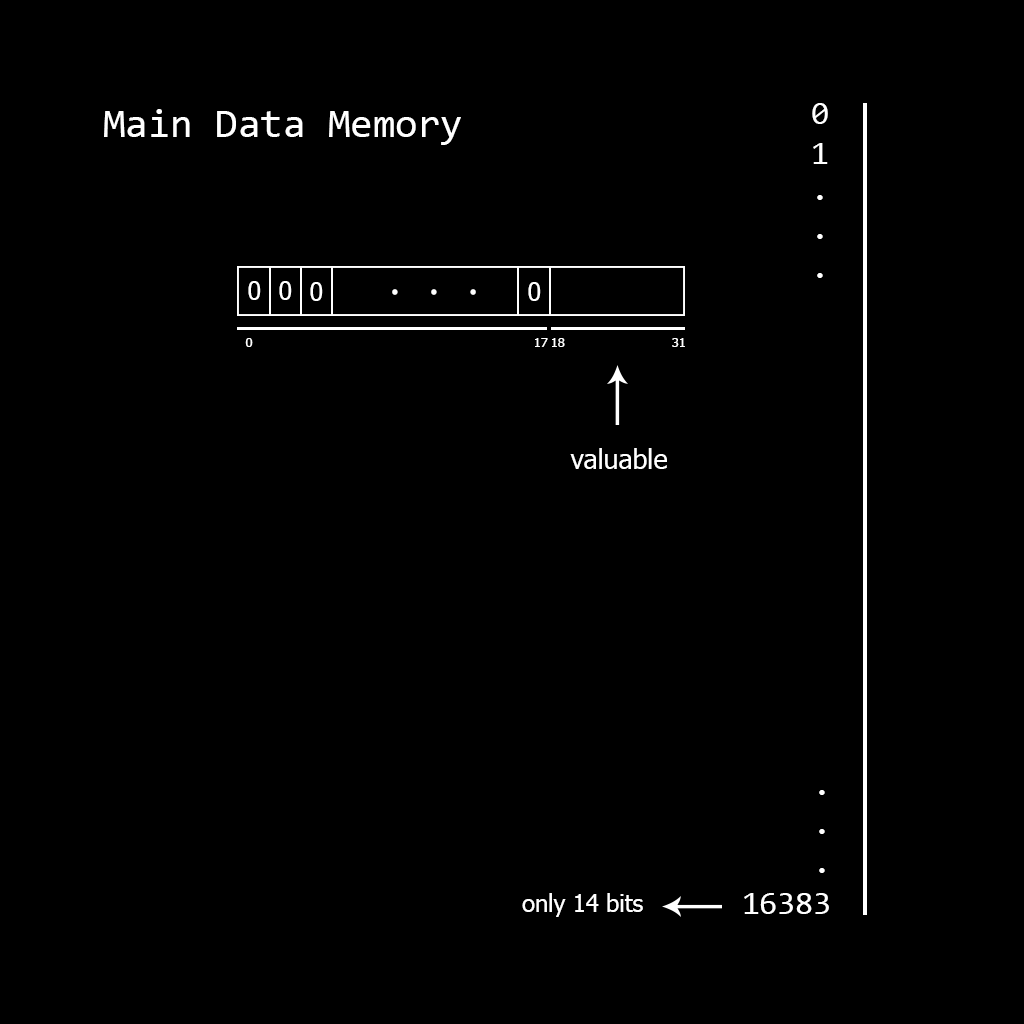
<style>
.page{position:relative;width:1024px;height:1024px;background:#000000}
.page>*{position:absolute;margin:0}
.t1{font:40.9px "Consolas";color:#ffffff}
.t2{font:32.5px "Consolas";color:#ffffff}
.t3{font:24.8px "Tahoma";color:#ffffff}
.t4{font:12.5px "Tahoma";color:#ffffff}
.t5{font:26.7px "Tahoma";color:#ffffff}
.t6{font:23.7px "Tahoma";color:#ffffff}
</style>
<div class="page">
<p class="t1" style="left:104px;top:109px;width:357px;height:36px">Main Data Memory</p>
<p class="t2" style="left:812px;top:103px;width:16px;height:21px">0</p>
<p class="t2" style="left:813px;top:143px;width:15px;height:21px">1</p>
<p class="t2" style="left:817px;top:195px;width:6px;height:83px;text-align:center">.<br>.<br>.</p>
<p class="t3" style="left:248px;top:281px;width:13px;height:19px">0</p>
<p class="t3" style="left:279px;top:281px;width:13px;height:19px">0</p>
<p class="t3" style="left:310px;top:282px;width:13px;height:19px">0</p>
<p class="t2" style="left:392px;top:289px;width:84px;height:6px;text-align:center;rotate:-90deg">.<br>.<br>.</p>
<p class="t3" style="left:528px;top:282px;width:13px;height:19px">0</p>
<p class="t4" style="left:245px;top:338px;width:8px;height:9px">0</p>
<p class="t4" style="left:535px;top:338px;width:13px;height:9px">17</p>
<p class="t4" style="left:552px;top:338px;width:13px;height:9px">18</p>
<p class="t4" style="left:672px;top:338px;width:13px;height:9px">31</p>
<p class="t5" style="left:570px;top:448px;width:97px;height:21px">valuable</p>
<p class="t2" style="left:819px;top:790px;width:6px;height:83px;text-align:center">.<br>.<br>.</p>
<p class="t6" style="left:522px;top:893px;width:121px;height:24px">only 14 bits</p>
<p class="t2" style="left:744px;top:893px;width:85px;height:21px">16383</p>
</div>
